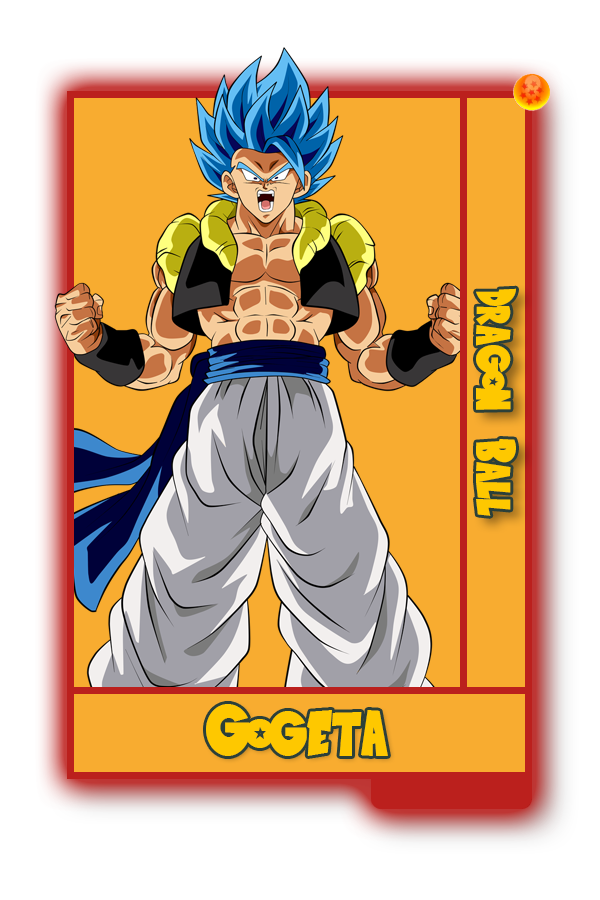
<style>
.page{position:relative;width:600px;height:900px;background:#f8ac30}
.page>*{position:absolute;margin:0}
.t1{font:56.9px "SaiyanSans";color:#fec800}
.t2{font:75px "SaiyanSans";color:#fec800}
</style>
<div class="page">
<p class="t1" style="left:476px;top:288px;width:40px;height:228px;rotate:90deg">Dragon Ball</p>
<p class="t2" style="left:206px;top:704px;width:182px;height:52px">Gogeta</p>
</div>
